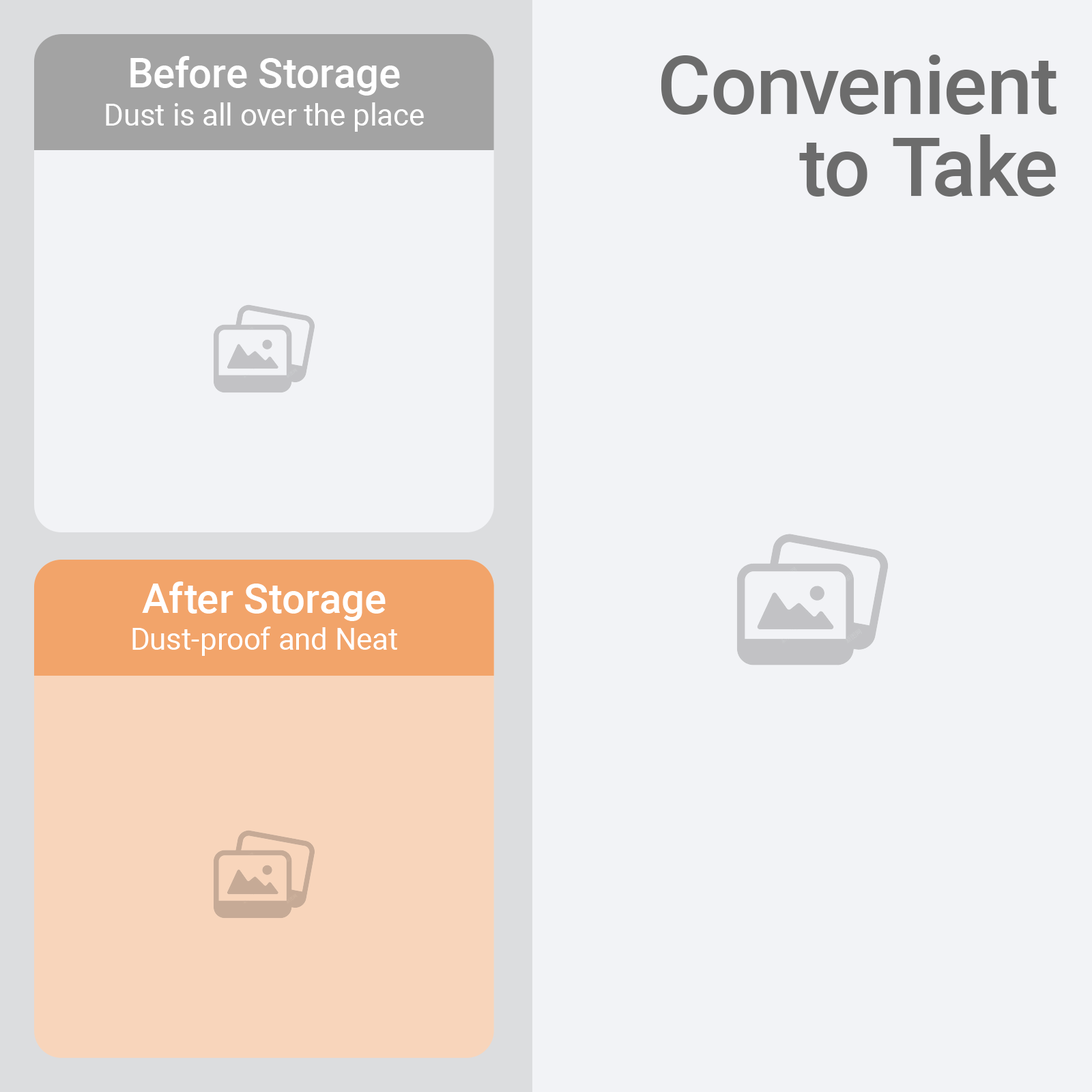
<style>
.page{position:relative;width:1092px;height:1092px;background:#f2f3f6}
.page>*{position:absolute;margin:0}
.t1{font:40.9px "Roboto-Medium";color:#ffffff}
.t2{font:81.9px/81.9px "Roboto-Medium";color:#6c6c6c}
.t3{font:30px "Roboto-Regular";color:#ffffff}
</style>
<div class="page">
<p class="t1" style="left:130px;top:56px;width:270px;height:40px">Before Storage</p>
<p class="t2" style="left:661px;top:55px;width:395px;height:142px;text-align:right">Convenient<br> to Take</p>
<p class="t3" style="left:106px;top:102px;width:318px;height:30px">Dust is all over the place</p>
<p class="t1" style="left:142px;top:581px;width:244px;height:40px">After Storage</p>
<p class="t3" style="left:132px;top:627px;width:265px;height:29px">Dust-proof and Neat</p>
</div>
